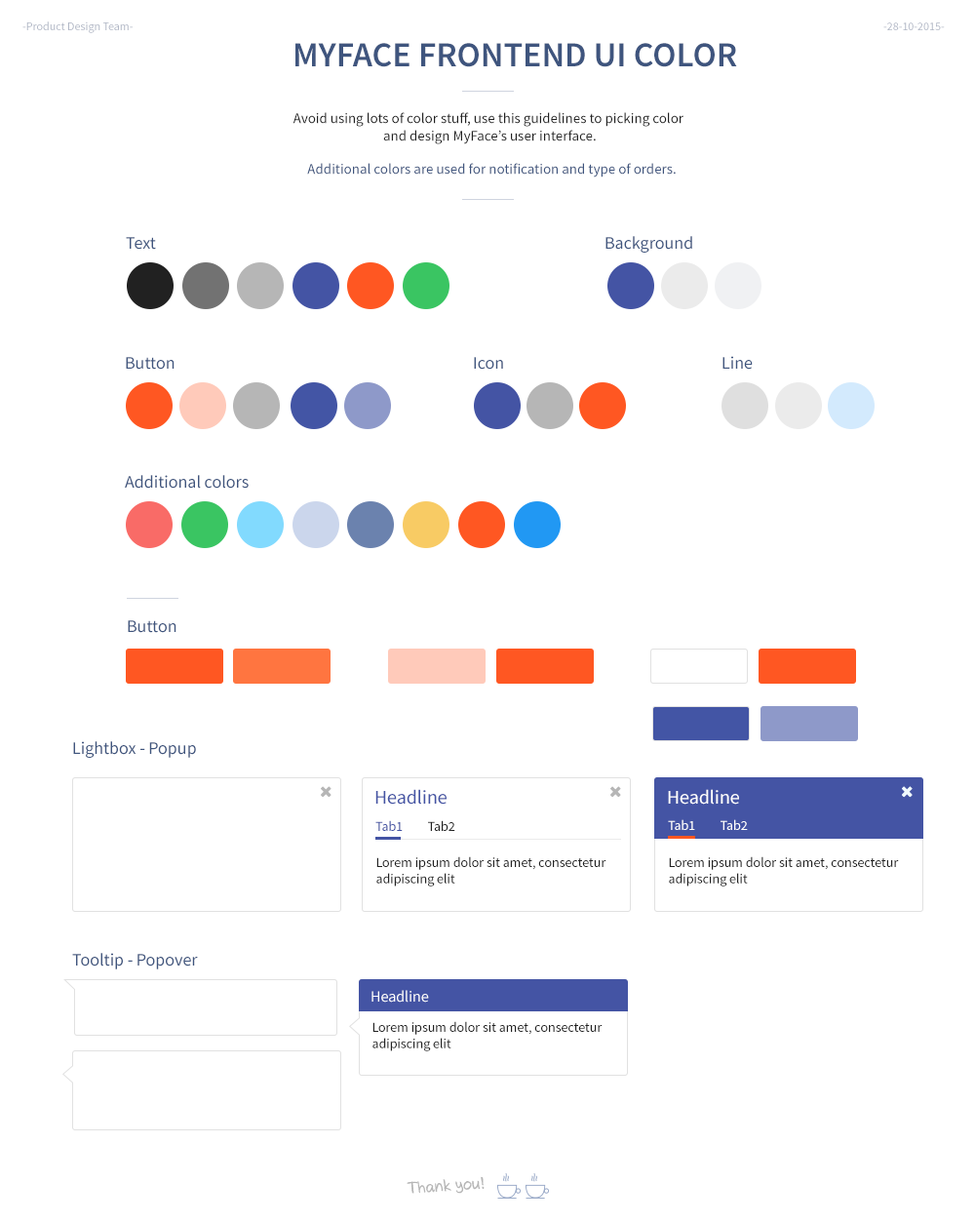
<style>
.page{position:relative;width:975px;height:1223px;background:#ffffff}
.page>*{position:absolute;margin:0}
.t1{font:11.7px "SourceSansPro-Regular";color:#b0b6c5}
.t2{font:35.1px "SourceSansPro-Semibold";color:#3f557e;text-transform:uppercase}
.t3{font:14.6px "SourceSansPro-Regular";color:#212121}
.t4{font:14.6px "SourceSansPro-Regular";color:#3f557e}
.t5{font:17.6px "SourceSansPro-Regular";color:#3f557e}
.t6{font:19.5px "SourceSansPro-Regular";color:#4454a4}
.t7{font:19.5px "SourceSansPro-Regular";color:#ffffff}
.t8{font:13.7px "SourceSansPro-Regular";color:#4454a4}
.t9{font:13.7px "SourceSansPro-Regular";color:#212121}
.t10{font:13.7px "SourceSansPro-Regular";color:#ffffff}
.t11{font:15.6px "SourceSansPro-Regular";color:#ffffff}
</style>
<div class="page">
<p class="t1" style="left:22px;top:21px;width:111px;height:12px">-Product Design Team-</p>
<p class="t1" style="left:883px;top:22px;width:62px;height:8px">-28-10-2015-</p>
<p class="t2" style="left:295px;top:43px;width:442px;height:24px">MyFace frontend UI Color</p>
<p class="t3" style="left:293px;top:112px;width:391px;height:32px;text-align:center">Avoid using lots of color stuff, use this guidelines to picking color <br>and design MyFace’s user interface.</p>
<p class="t4" style="left:307px;top:163px;width:369px;height:14px">Additional colors are used for notification and type of orders.</p>
<p class="t5" style="left:126px;top:237px;width:30px;height:13px">Text</p>
<p class="t5" style="left:606px;top:236px;width:86px;height:17px">Background</p>
<p class="t5" style="left:126px;top:357px;width:49px;height:13px">Button</p>
<p class="t5" style="left:474px;top:357px;width:29px;height:13px">Icon</p>
<p class="t5" style="left:723px;top:356px;width:30px;height:14px">Line</p>
<p class="t5" style="left:125px;top:475px;width:124px;height:14px">Additional colors</p>
<p class="t5" style="left:128px;top:620px;width:49px;height:13px">Button</p>
<p class="t5" style="left:73px;top:741px;width:123px;height:17px">Lightbox - Popup</p>
<p class="t6" style="left:375px;top:789px;width:72px;height:15px">Headline</p>
<p class="t7" style="left:668px;top:789px;width:71px;height:15px">Headline</p>
<p class="t8" style="left:375px;top:820px;width:80px;height:11px">Tab1         <span class="t9">Tab2</span></p>
<p class="t10" style="left:668px;top:819px;width:80px;height:11px">Tab1         Tab2</p>
<p class="t9" style="left:376px;top:856px;width:231px;height:30px">Lorem ipsum dolor sit amet, consectetur adipiscing elit</p>
<p class="t9" style="left:669px;top:856px;width:230px;height:30px">Lorem ipsum dolor sit amet, consectetur adipiscing elit</p>
<p class="t5" style="left:72px;top:953px;width:126px;height:16px">Tooltip - Popover</p>
<p class="t11" style="left:372px;top:990px;width:57px;height:12px">Headline</p>
<p class="t9" style="left:373px;top:1021px;width:230px;height:30px">Lorem ipsum dolor sit amet, consectetur adipiscing elit</p>
</div>
